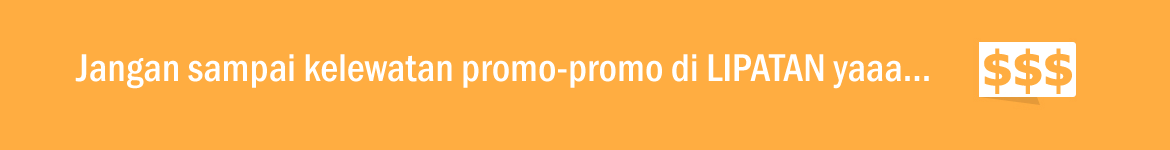
<style>
.page{position:relative;width:1170px;height:150px;background:#ffad41}
.page>*{position:absolute;margin:0}
.t1{font:40px "FranklinGothic-MediumCond";color:#ffffff}
.t2{font:48px "Tahoma-Bold";color:#ffad41}
</style>
<div class="page">
<p class="t1" style="left:75px;top:54px;width:854px;height:35px">Jangan sampai kelewatan promo-promo di LIPATAN yaaa...</p>
<p class="t2" style="left:984px;top:48px;width:88px;height:46px">$$$</p>
</div>
